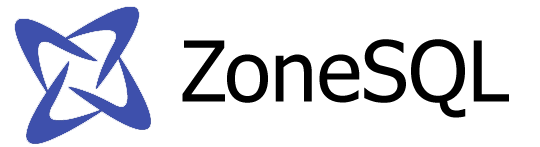
<style>
.page{position:relative;width:540px;height:147px;background:#ffffff}
.page>*{position:absolute;margin:0}
.t1{font:84px "Tahoma";color:#000000}
</style>
<div class="page">
<p class="t1" style="left:182px;top:39px;width:327px;height:79px">ZoneSQL</p>
</div>
